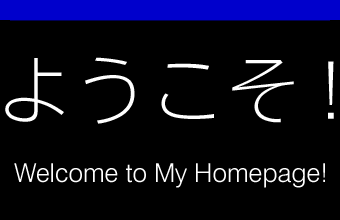
<style>
.page{position:relative;width:340px;height:220px;background:#000000}
.page>*{position:absolute;margin:0}
.t1{font:76px "FMotoyaCedar-W1-90msp-RKSJ-H";color:#ffffff}
.t2{font:26px "Swiss721BT-Light";color:#ffffff}
</style>
<div class="page">
<p class="t1" style="left:5px;top:57px;width:329px;height:67px">ようこそ!</p>
<p class="t2" style="left:14px;top:163px;width:311px;height:25px">Welcome to My Homepage!</p>
</div>
